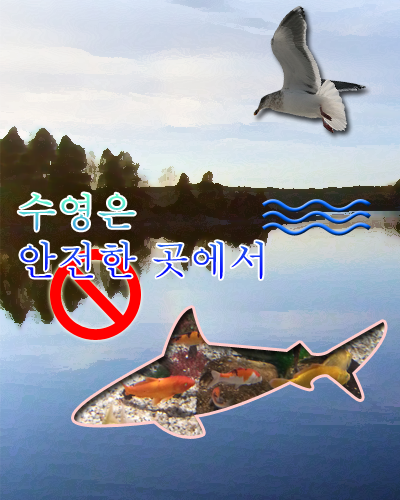
<style>
.page{position:relative;width:400px;height:500px}
.page>*{position:absolute;margin:0}
.t1{font:40px "Batang"}
</style>
<div class="page">
<p class="t1" style="left:18px;top:193px;width:245px;height:86px">수영은<br>안전한 곳에서</p>
</div>
